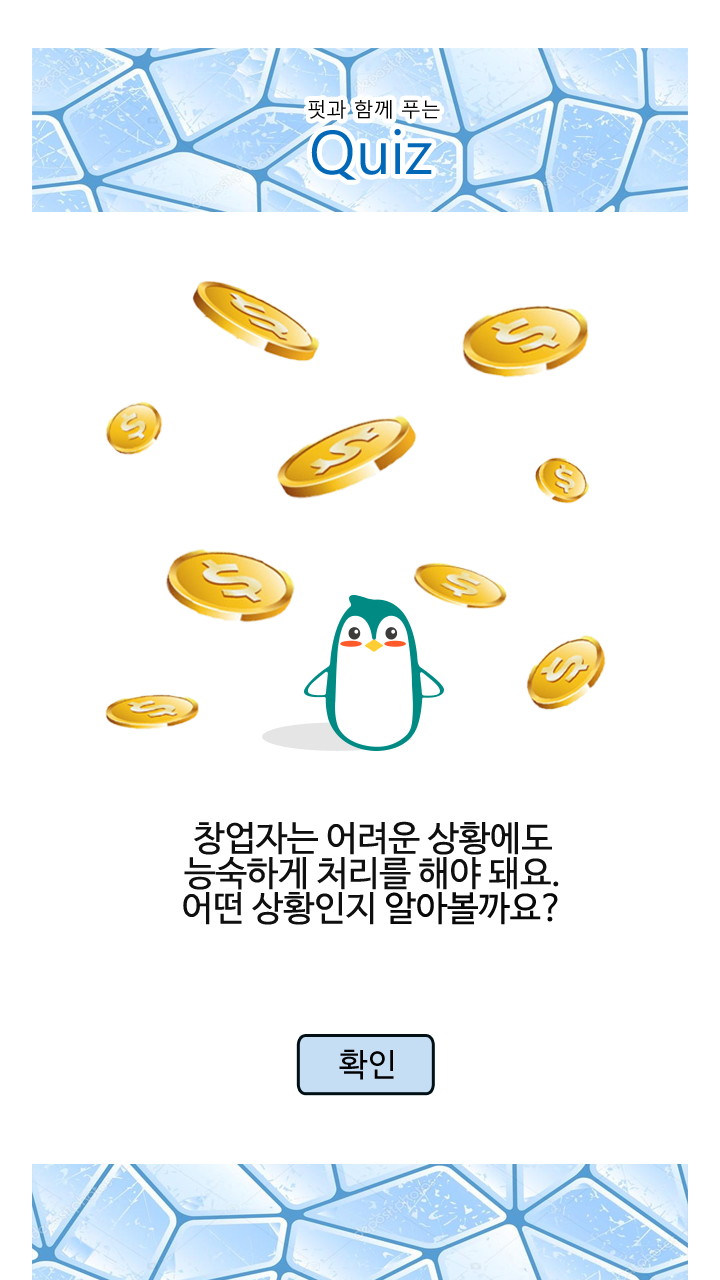
<style>
.page{position:relative;width:720px;height:1280px;background:#ffffff}
.page>*{position:absolute;margin:0}
.t1{font:20px/24px "MalgunGothic";color:#000000}
.t2{font:20px/26px "MalgunGothic";color:#000000}
.t3{font:60px/24px "MalgunGothic";color:#0068b7}
.t4{font:35px/35px "NanumBarunGothic";color:#0f0f0f}
.t5{font:35px/35px "NanumBarunGothic";color:#080808}
.t6{font:35px "NanumBarunGothic";color:#080808}
.t7{font:32px "NanumBarunGothic";color:#000000}
</style>
<div class="page">
<p class="t1" style="left:308px;top:100px;width:132px;height:80px;text-align:center"><span class="t2">  </span>펏과 함께 푸는 <br><span class="t3">Quiz</span></p>
<p class="t4" style="left:183px;top:821px;width:376px;height:104px;text-align:center">창업자는 어려운 상황에도<br>능숙하게 처리를 해야 돼요.<br>어떤 상황인지 <span class="t5">알아볼까요</span><span class="t6">?</span></p>
<p class="t7" style="left:339px;top:1049px;width:55px;height:31px">확인</p>
</div>
